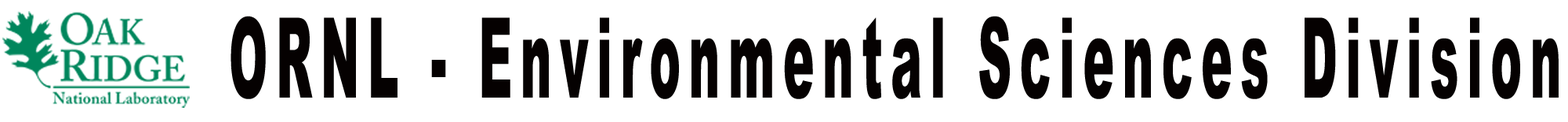
<style>
.page{position:relative;width:1568px;height:122px;background:#ffffff}
.page>*{position:absolute;margin:0}
.t1{font:111.1px "Arial-Black";letter-spacing:0.18em;color:#050101;scale:0.42 1}
</style>
<div class="page">
<p class="t1" style="left:230px;top:16px;width:1329px;height:83px">ORNL - Environmental Sciences Division</p>
</div>
